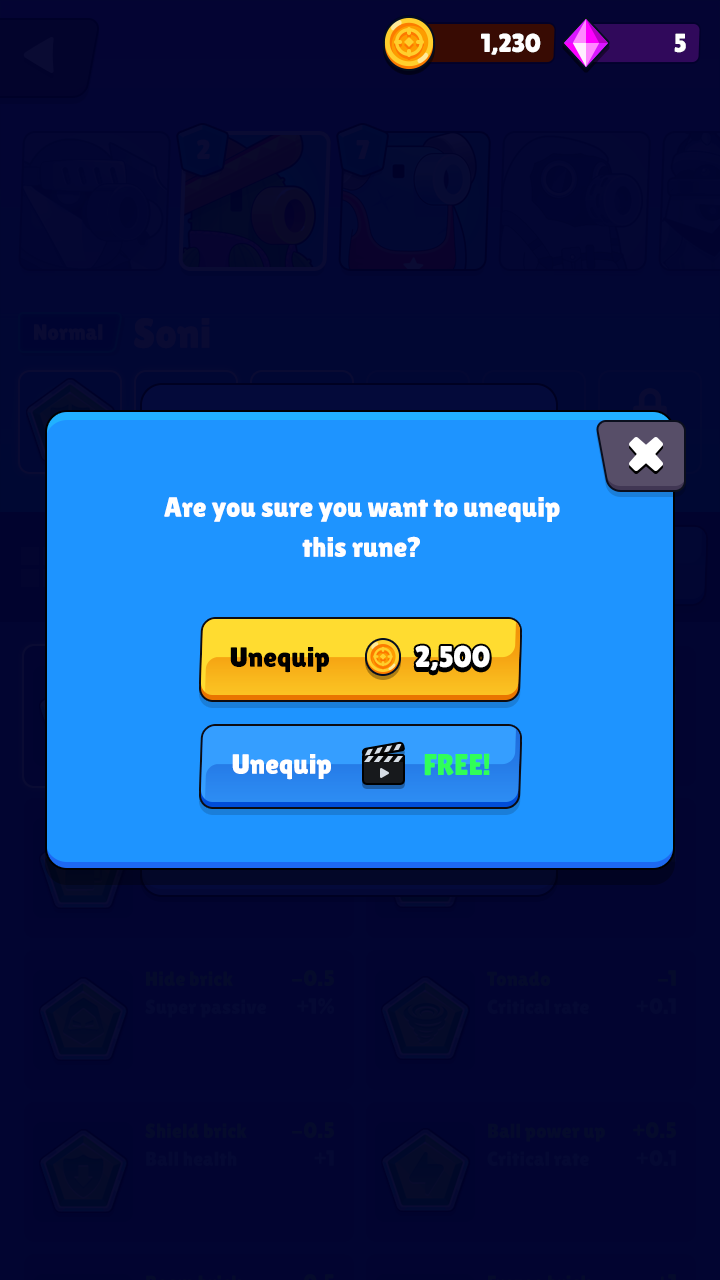
<style>
.page{position:relative;width:720px;height:1280px;background:#1e94ff}
.page>*{position:absolute;margin:0}
.t1{font:26px "LilitaOne";letter-spacing:-0.01em;color:#ffffff;text-transform:uppercase}
.t2{font:28px/40px "LilitaOne";color:#ffffff}
.t3{font:28px "LilitaOne";color:#000000}
.t4{font:30px "LilitaOne";color:#ffffff;text-transform:uppercase}
.t5{font:28px "LilitaOne";color:#ffffff}
.t6{font:30px "LilitaOne";color:#30ff58;text-transform:uppercase}
</style>
<div class="page">
<p class="t1" style="left:481px;top:33px;width:60px;height:22px">1,230</p>
<p class="t1" style="left:674px;top:33px;width:12px;height:20px">5</p>
<p class="t2" style="left:164px;top:497px;width:396px;height:60px;text-align:center">Are you sure you want to unequip<br>this rune?</p>
<p class="t3" style="left:230px;top:647px;width:99px;height:26px">Unequip</p>
<p class="t4" style="left:415px;top:645px;width:75px;height:26px">2,500</p>
<p class="t5" style="left:232px;top:754px;width:99px;height:26px">Unequip</p>
<p class="t6" style="left:424px;top:753px;width:66px;height:23px">Free!</p>
</div>
